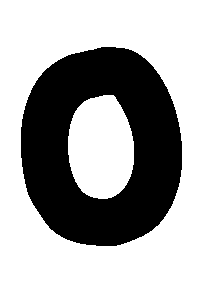
<style>
.page{position:relative;width:200px;height:300px;background:#ffffff}
.page>*{position:absolute;margin:0}
.t1{font:400px "CatatanPerjalanan";color:#000000}
</style>
<div class="page">
<p class="t1" style="left:21px;top:47px;width:161px;height:199px">0</p>
</div>
